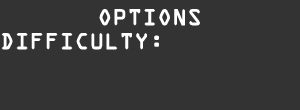
<style>
.page{position:relative;width:300px;height:110px;background:#333333}
.page>*{position:absolute;margin:0}
.t1{font:20px "OCRAStd";color:#ffffff;font-weight:bold}
</style>
<div class="page">
<p class="t1" style="left:1px;top:9px;width:199px;height:41px;text-align:center">OPTIONS<br>DIFFICULTY:</p>
</div>
